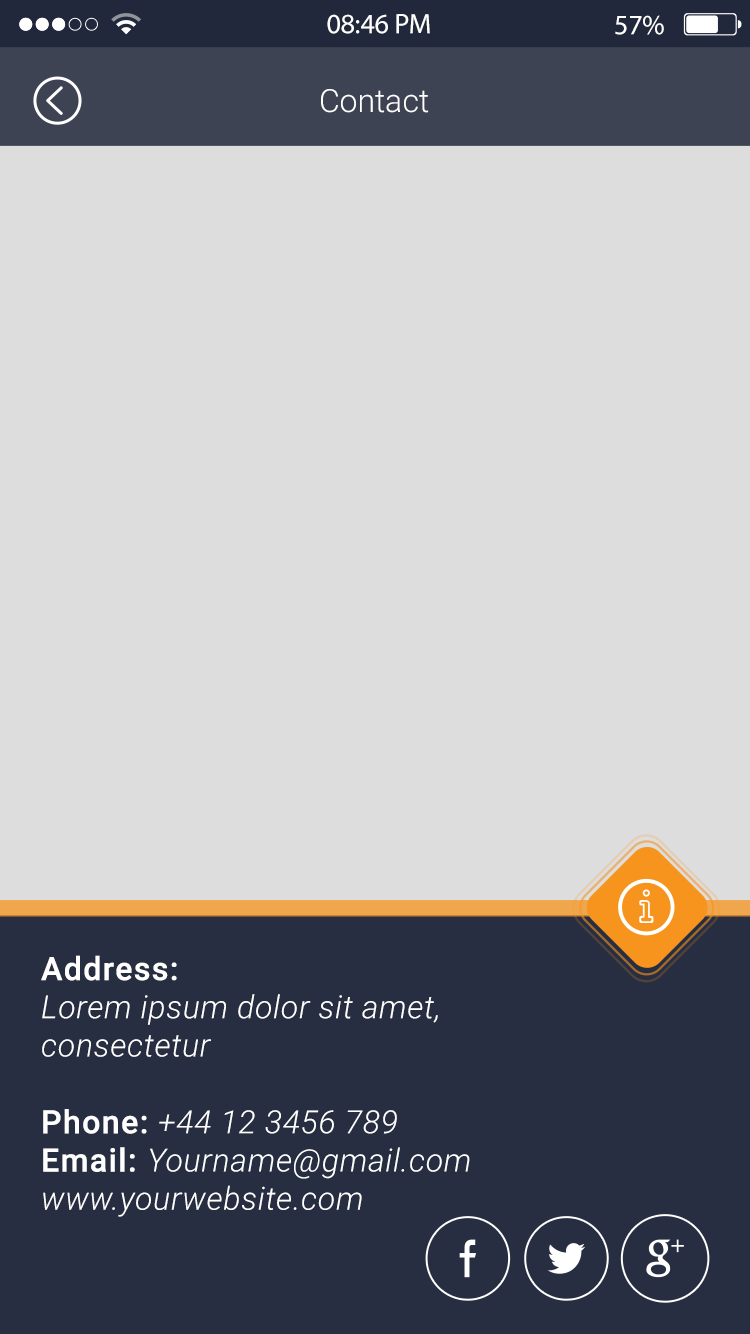
<style>
.page{position:relative;width:750px;height:1334px;background:#dddddd}
.page>*{position:absolute;margin:0}
.t1{font:28.2px "MyriadPro-Regular";color:#fefeff}
.t2{font:28.2px "MyriadPro-Regular";color:#ffffff}
.t3{font:32px "Roboto-Light";color:#ffffff}
.t4{font:31.9px "Roboto-LightItalic";letter-spacing:0.02em;color:#ffffff}
.t5{font:31.9px "Roboto-Medium";letter-spacing:0.02em;color:#ffffff;font-weight:bold}
</style>
<div class="page">
<p class="t1" style="left:327px;top:14px;width:103px;height:20px">08:46 PM</p>
<p class="t2" style="left:615px;top:15px;width:49px;height:20px">57%</p>
<p class="t3" style="left:321px;top:89px;width:108px;height:24px">Contact</p>
<p class="t4" style="left:41px;top:955px;width:429px;height:262px"><span class="t5">Address:<br></span>Lorem ipsum dolor sit amet,<br>consectetur<br><br><span class="t5">Phone: </span>+44 12 3456 789<br><span class="t5">Email: </span>Yourname@gmail.com<br>www.yourwebsite.com</p>
</div>
